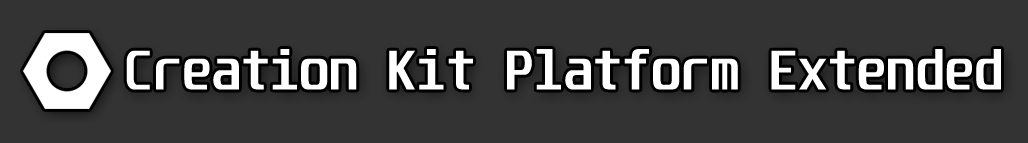
<style>
.page{position:relative;width:1028px;height:143px;background:#333333}
.page>*{position:absolute;margin:0}
.t1{font:48px "Unispace-Bold";color:#ffffff}
</style>
<div class="page">
<p class="t1" style="left:126px;top:49px;width:875px;height:41px">Creation Kit Platform Extended</p>
</div>
